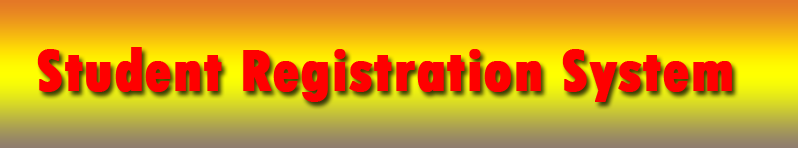
<style>
.page{position:relative;width:798px;height:148px}
.page>*{position:absolute;margin:0}
.t1{font:61.5px "TwCenMT-CondensedExtraBold";color:#ff0000;font-weight:bold}
</style>
<div class="page">
<p class="t1" style="left:37px;top:47px;width:695px;height:55px">Student Registration System</p>
</div>
